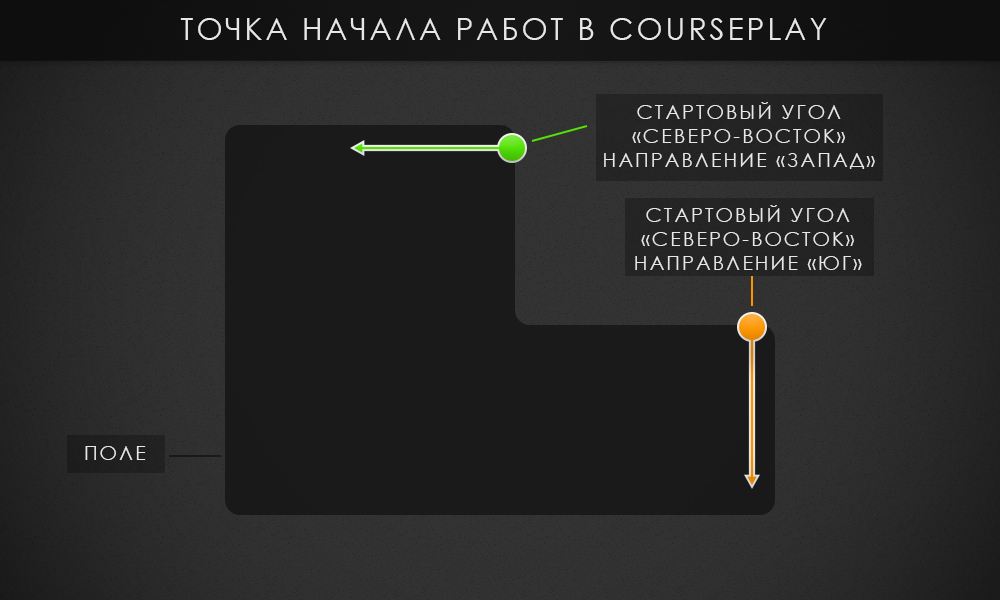
<style>
.page{position:relative;width:1000px;height:600px;background:#1a1a1a}
.page>*{position:absolute;margin:0}
.t1{font:30px "CenturyGothic";letter-spacing:0.1em;color:#e7e7e7}
.t2{font:20px "CenturyGothic";letter-spacing:0.1em;color:#e7e7e7}
</style>
<div class="page">
<p class="t1" style="left:180px;top:18px;width:647px;height:22px">ТОЧКА НАЧАЛА РАБОТ В COURSEPLAY</p>
<p class="t2" style="left:604px;top:102px;width:271px;height:67px;text-align:center">СТАРТОВЫЙ УГОЛ<br>«СЕВЕРО-ВОСТОК»<br>НАПРАВЛЕНИЕ «ЗАПАД»</p>
<p class="t2" style="left:635px;top:205px;width:227px;height:65px;text-align:center">СТАРТОВЫЙ УГОЛ<br>«СЕВЕРО-ВОСТОК»<br>НАПРАВЛЕНИЕ «ЮГ»</p>
<p class="t2" style="left:85px;top:446px;width:61px;height:14px">ПОЛЕ</p>
</div>
